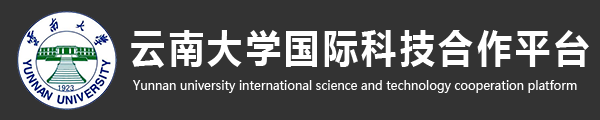
<style>
.page{position:relative;width:600px;height:120px;background:#333333}
.page>*{position:absolute;margin:0}
.t1{font:38.5px "MicrosoftYaHei-Bold";letter-spacing:0.1em;color:#ffffff;scale:0.91 1}
.t2{font:13.2px "MicrosoftYaHei";color:#ffffff;scale:0.91 1}
</style>
<div class="page">
<p class="t1" style="left:131px;top:30px;width:458px;height:38px">云南大学国际科技合作平台</p>
<p class="t2" style="left:133px;top:80px;width:444px;height:13px">Yunnan university international science and technology cooperation platform</p>
</div>
